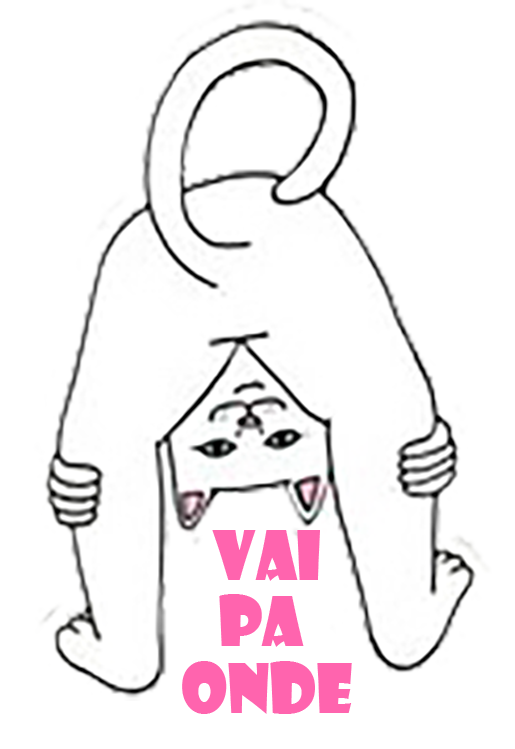
<style>
.page{position:relative;width:515px;height:749px;background:#ffffff}
.page>*{position:absolute;margin:0}
.t1{font:66.7px/66.7px "ShowcardGothic-Reg";letter-spacing:-0.005em;color:#ff64ae}
</style>
<div class="page">
<p class="t1" style="left:182px;top:530px;width:170px;height:184px;text-align:center">vai<br>pa <br>onde</p>
</div>
